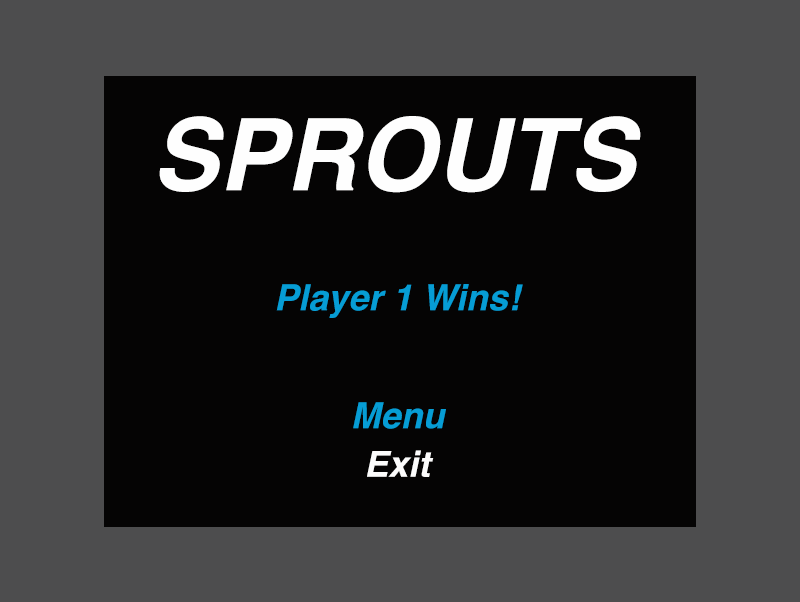
<style>
.page{position:relative;width:800px;height:602px;background:#050404}
.page>*{position:absolute;margin:0}
.t1{font:100px "Helvetica-BoldOblique";color:#fefefe}
.t2{font:36px "Helvetica-BoldOblique";color:#069dd5}
.t3{font:36px "Helvetica-BoldOblique";color:#fcfcfc}
</style>
<div class="page">
<p class="t1" style="left:159px;top:116px;width:482px;height:77px">SPROUTS</p>
<p class="t2" style="left:276px;top:284px;width:247px;height:34px">Player 1 Wins!</p>
<p class="t2" style="left:353px;top:402px;width:93px;height:27px">Menu</p>
<p class="t3" style="left:367px;top:450px;width:67px;height:27px">Exit</p>
</div>
